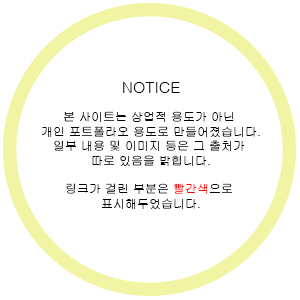
<style>
.page{position:relative;width:300px;height:300px;background:#ffffff}
.page>*{position:absolute;margin:0}
.t1{font:12px "Gulim";color:#000000}
.t2{font:16px "Gulim";color:#000000}
.t3{font:12px "Gulim";color:#ff0000}
</style>
<div class="page">
<p class="t1" style="left:42px;top:82px;width:218px;height:127px;text-align:center"><span class="t2">NOTICE<br></span><br>본 사이트는 상업적 용도가 아닌 <br>개인 포트폴라오 용도로 만들어졌습니다.<br>일부 내용 및 이미지 등은 그 출처가 <br>따로 있음을 밝힙니다.<br><br>링크가 걸린 부분은 <span class="t3">빨간색</span>으로 <br>표시해두었습니다.</p>
</div>
